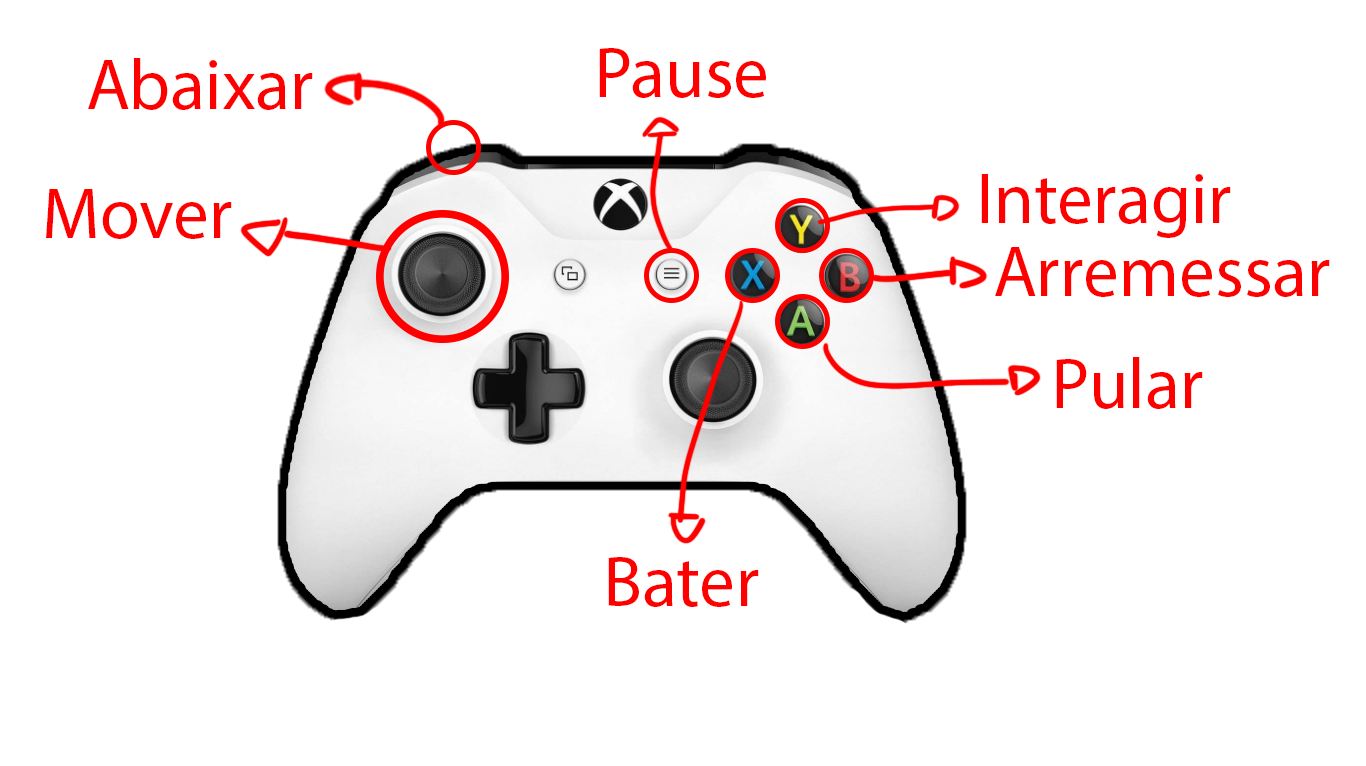
<style>
.page{position:relative;width:1366px;height:766px;background:#ffffff}
.page>*{position:absolute;margin:0}
.t1{font:72px "MyriadPro-Regular";color:#ff0000}
</style>
<div class="page">
<p class="t1" style="left:599px;top:48px;width:167px;height:50px">Pause</p>
<p class="t1" style="left:88px;top:58px;width:225px;height:52px">Abaixar</p>
<p class="t1" style="left:981px;top:174px;width:250px;height:64px">Interagir</p>
<p class="t1" style="left:46px;top:189px;width:186px;height:50px">Mover</p>
<p class="t1" style="left:995px;top:247px;width:335px;height:50px">Arremessar</p>
<p class="t1" style="left:1056px;top:357px;width:147px;height:52px">Pular</p>
<p class="t1" style="left:608px;top:557px;width:151px;height:50px">Bater</p>
</div>
